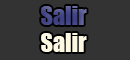
<style>
.page{position:relative;width:130px;height:60px;background:#333333}
.page>*{position:absolute;margin:0}
.t1{font:24px "Impact";color:#474a88}
.t2{font:24px "Impact";color:#fdf8e2}
</style>
<div class="page">
<p class="t1" style="left:41px;top:6px;width:46px;height:19px">Salir</p>
<p class="t2" style="left:41px;top:33px;width:46px;height:19px">Salir</p>
</div>
